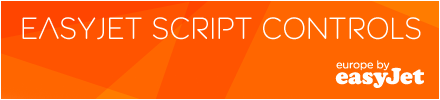
<style>
.page{position:relative;width:440px;height:100px;background:#ff6600}
.page>*{position:absolute;margin:0}
.t1{font:30.7px "easyJetRoundedHeadline";color:#ffffff}
</style>
<div class="page">
<p class="t1" style="left:22px;top:17px;width:399px;height:23px">easyjet Script Controls</p>
</div>
